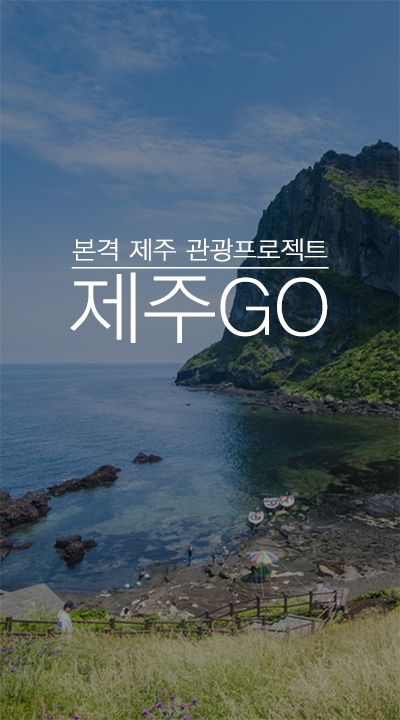
<style>
.page{position:relative;width:400px;height:720px}
.page>*{position:absolute;margin:0}
.t1{font:25px "YDIYGO310";color:#ffffff;font-weight:bold}
.t2{font:79.2px "YDIYGO310";color:#ffffff;font-weight:bold}
</style>
<div class="page">
<p class="t1" style="left:72px;top:238px;width:256px;height:24px">본격 제주 관광프로젝트</p>
<p class="t1" style="left:71px;top:267px;width:258px;height:2px">──────────</p>
<p class="t2" style="left:70px;top:272px;width:258px;height:71px">제주GO</p>
</div>
